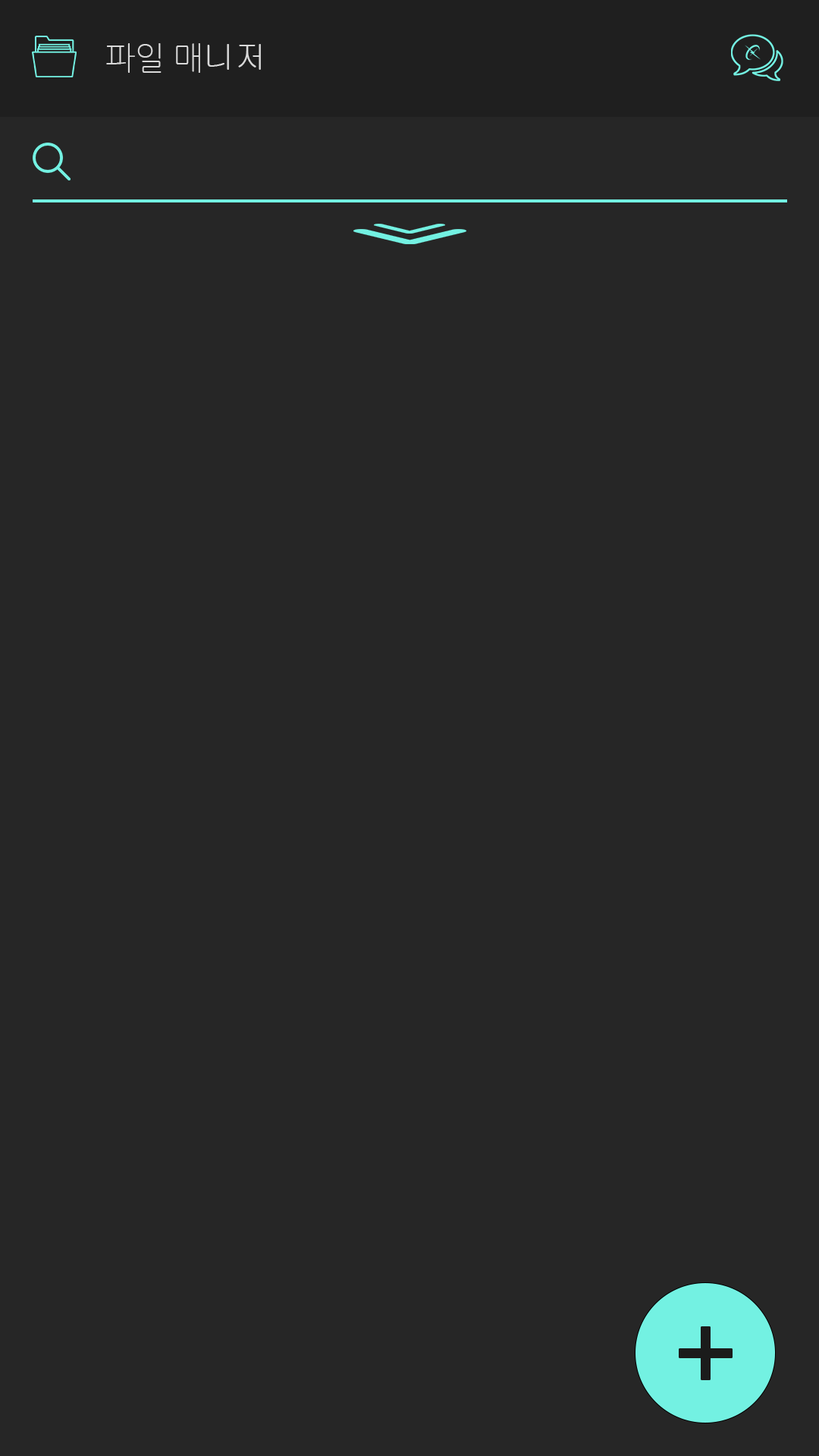
<style>
.page{position:relative;width:819px;height:1456px;background:#262626}
.page>*{position:absolute;margin:0}
.t1{font:31.6px "NanumGothicLight";color:#d9d9d9}
.t2{font:31.6px "Gulim";color:#d9d9d9}
</style>
<div class="page">
<p class="t1" style="left:106px;top:43px;width:155px;height:30px">파일 매<span class="t2">니저</span></p>
</div>
